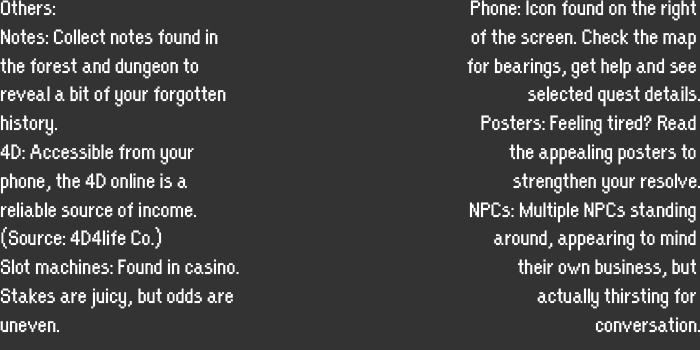
<style>
.page{position:relative;width:700px;height:350px;background:#333333}
.page>*{position:absolute;margin:0}
.t1{font:24px "OrangeKid-Regular";color:#ffffff}
</style>
<div class="page">
<p class="t1" style="left:0px;top:0px;width:239px;height:333px">Others: <br>Notes: Collect notes found in <br>the forest and dungeon to <br>reveal a bit of your forgotten <br>history.<br>4D: Accessible from your <br>phone, the 4D online is a <br>reliable source of income. <br>(Source: 4D4life Co.)<br>Slot machines: Found in casino. <br>Stakes are juicy, but odds are <br>uneven.</p>
<p class="t1" style="left:467px;top:0px;width:234px;height:333px;text-align:right">Phone: Icon found on the right <br>of the screen. Check the map <br>for bearings, get help and see <br>selected quest details.<br>Posters: Feeling tired? Read <br>the appealing posters to <br>strengthen your resolve.<br>NPCs: Multiple NPCs standing <br>around, appearing to mind <br>their own business, but <br>actually thirsting for <br>conversation.</p>
</div>
